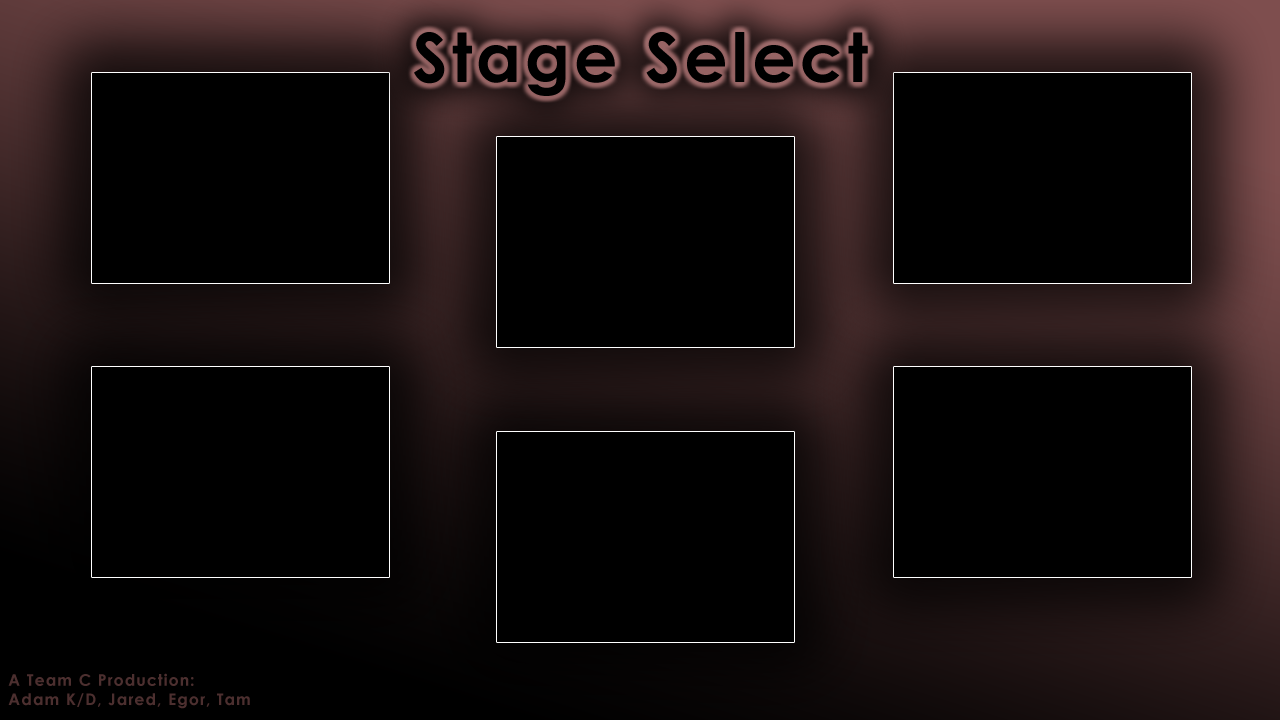
<style>
.page{position:relative;width:1280px;height:720px;background:#000000}
.page>*{position:absolute;margin:0}
.t1{font:68px "CenturyGothic-Bold";letter-spacing:0.06em;color:#000000}
.t2{font:16px "CenturyGothic-Bold";letter-spacing:0.06em;color:#4c2f2f}
</style>
<div class="page">
<p class="t1" style="left:414px;top:32px;width:454px;height:64px">Stage Select</p>
<p class="t2" style="left:8px;top:673px;width:242px;height:36px">A Team C Production:<br>Adam K/D, Jared, Egor, Tam</p>
</div>
